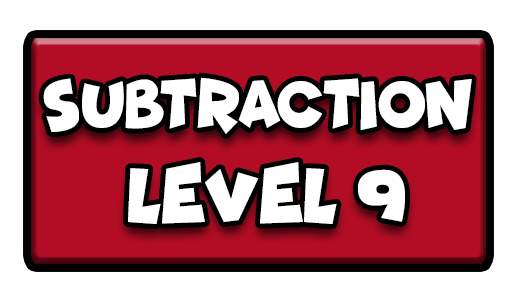
<style>
.page{position:relative;width:517px;height:301px;background:#ffffff}
.page>*{position:absolute;margin:0}
.t1{font:68.8px "Funhouse";color:#ffffff;scale:0.85 1}
.t2{font:77.7px "Funhouse";color:#ffffff;scale:0.95 1}
</style>
<div class="page">
<p class="t1" style="left:43px;top:77px;width:429px;height:57px">SUBTRACTION</p>
<p class="t2" style="left:128px;top:162px;width:277px;height:62px">LEVEL 9</p>
</div>
